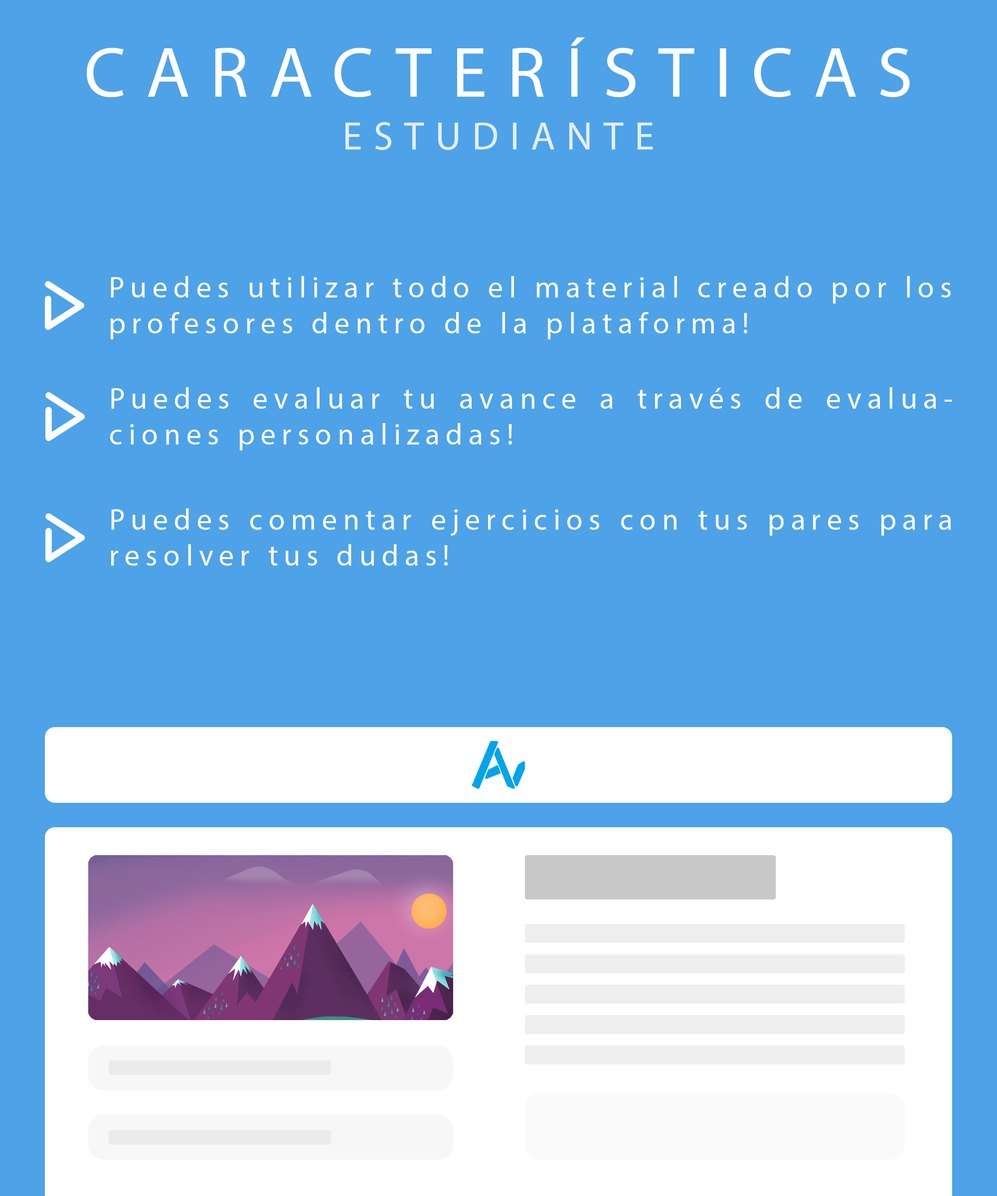
<style>
.page{position:relative;width:997px;height:1196px;background:#4da2e8}
.page>*{position:absolute;margin:0}
.t1{font:71.8px "MyriadPro-Regular";letter-spacing:0.28em;color:#ffffff}
.t2{font:71.8px "MyriadPro-Regular";color:#ffffff}
.t3{font:39.9px "MyriadPro-Regular";letter-spacing:0.28em;color:#e3eefb}
.t4{font:39.9px "MyriadPro-Regular";color:#e3eefb}
.t5{font:29.9px "MyriadPro-Regular";letter-spacing:0.2em;color:#ffffff}
</style>
<div class="page">
<p class="t1" style="left:87px;top:37px;width:823px;height:60px">CARACTERÍSTICA<span class="t2">S</span></p>
<p class="t3" style="left:345px;top:122px;width:308px;height:28px">ESTUDIANT<span class="t4">E</span></p>
<p class="t5" style="left:110px;top:276px;width:840px;height:63px;text-align:justify">Puedes utilizar todo el material creado por los profesores dentro de la plataforma!</p>
<p class="t5" style="left:110px;top:387px;width:842px;height:64px;text-align:justify">Puedes evaluar tu avance a través de evaluaciones personalizadas!</p>
<p class="t5" style="left:111px;top:508px;width:840px;height:58px;text-align:justify">Puedes comentar ejercicios con tus pares para resolver tus dudas!</p>
</div>
